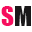
<style>
.page{position:relative;width:32px;height:32px;background:#ffffff}
.page>*{position:absolute;margin:0}
.t1{font:25px "Impact";color:#f60e5f}
.t2{font:25px "Impact";color:#191819}
</style>
<div class="page">
<p class="t1" style="left:1px;top:6px;width:30px;height:20px">S<span class="t2">M</span></p>
</div>
